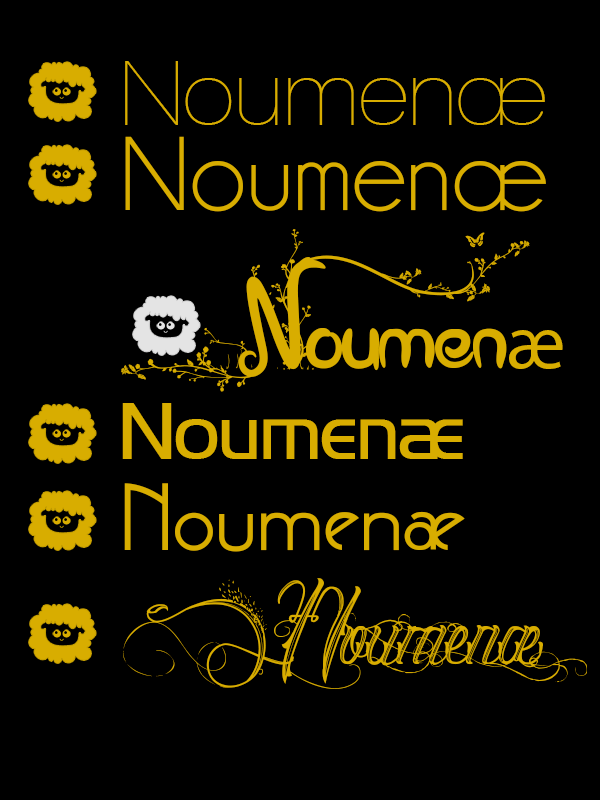
<style>
.page{position:relative;width:600px;height:800px;background:#000000}
.page>*{position:absolute;margin:0}
.t1{font:93px "Walkway";color:#d8ad00}
.t2{font:106px "Champagne&Limousines";color:#d8ad00}
.t3{font:131px "Eglantine";color:#d8ad00}
.t4{font:77px "MyriadPro-Regular";color:#d8ad00}
.t5{font:73px "HighlandGothicLightFLF";color:#d8ad00}
.t6{font:112px "GatsbyFLF-Bold";color:#d8ad00}
.t7{font:212px "DianedeFrance";color:#d8ad00}
</style>
<div class="page">
<p class="t1" style="left:125px;top:61px;width:420px;height:64px">Noumenæ</p>
<p class="t2" style="left:125px;top:136px;width:421px;height:76px">Noumenæ</p>
<p class="t3" style="left:121px;top:229px;width:442px;height:163px">Noumen<span class="t4">æ</span></p>
<p class="t5" style="left:122px;top:403px;width:341px;height:56px">Noumenæ</p>
<p class="t6" style="left:124px;top:483px;width:341px;height:69px">Noumenæ</p>
<p class="t7" style="left:123px;top:578px;width:464px;height:111px">Noumenæ</p>
</div>
